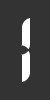
<style>
.page{position:relative;width:50px;height:100px;background:#333333}
.page>*{position:absolute;margin:0}
.t1{font:80px "LettersLaughingbyQuantizedandCalibrated";color:#ffffff}
</style>
<div class="page">
<p class="t1" style="left:21px;top:18px;width:9px;height:64px">1</p>
</div>
